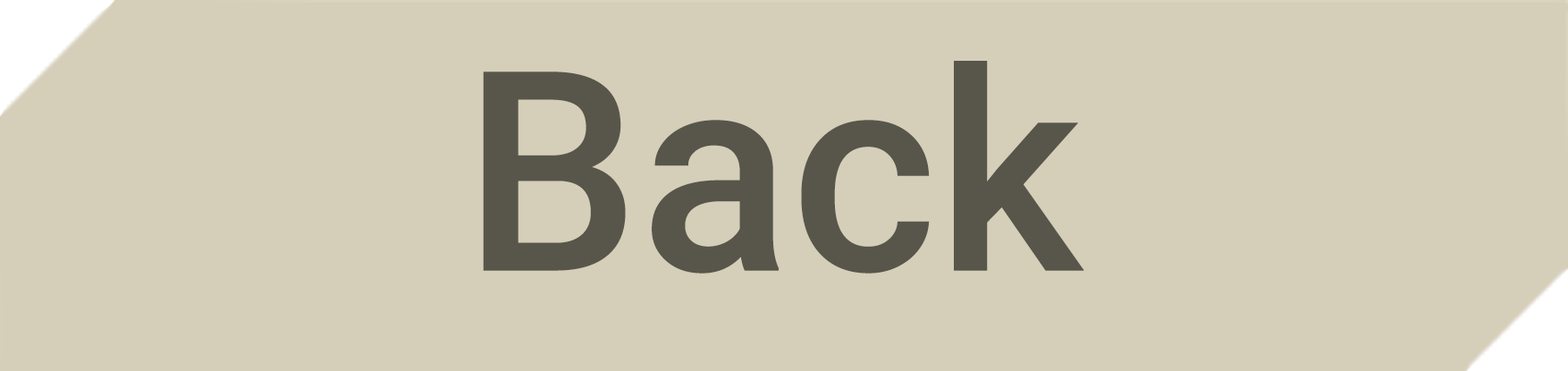
<style>
.page{position:relative;width:1568px;height:371px;background:#d5ceb8}
.page>*{position:absolute;margin:0}
.t1{font:279.4px "Roboto-Medium";color:#58564b}
</style>
<div class="page">
<p class="t1" style="left:483px;top:61px;width:601px;height:213px">Back</p>
</div>
